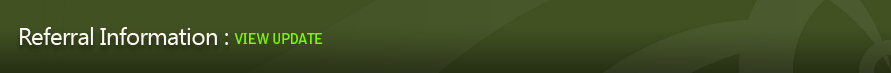
<style>
.page{position:relative;width:891px;height:73px;background:#415122}
.page>*{position:absolute;margin:0}
.t1{font:24px "SegoeUI";letter-spacing:-0.025em;color:#faf7f5}
.t2{font:14px "BellGothicStd-Bold";letter-spacing:-0.05em;color:#7af40e}
</style>
<div class="page">
<p class="t1" style="left:20px;top:27px;width:208px;height:18px">Referral Information :</p>
<p class="t2" style="left:234px;top:33px;width:89px;height:11px">VIEW UPDATE</p>
</div>
